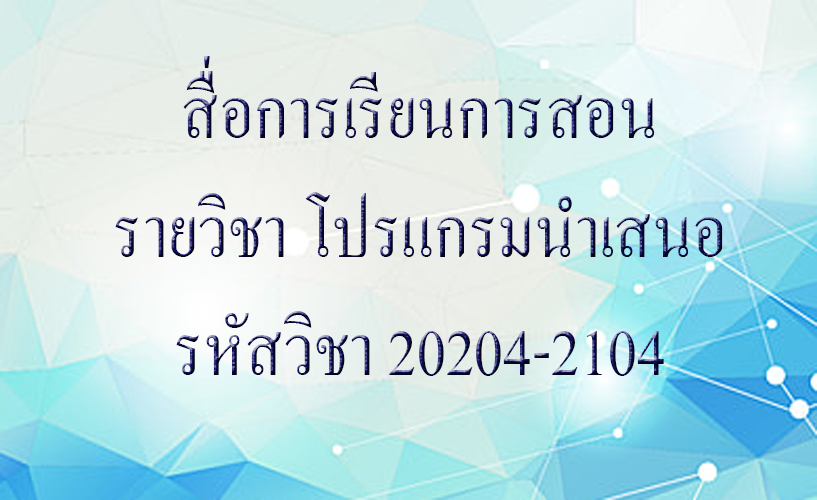
<style>
.page{position:relative;width:817px;height:500px}
.page>*{position:absolute;margin:0}
.t1{font:99.1px "AngsanaNew";scale:0.88 1}
</style>
<div class="page">
<p class="t1" style="left:115px;top:56px;width:608px;height:320px;text-align:center">สื่อการเรียนการสอน<br>รายวิชา โปรแกรมนำเสนอ<br>รหัสวิชา 20204-2104</p>
</div>
